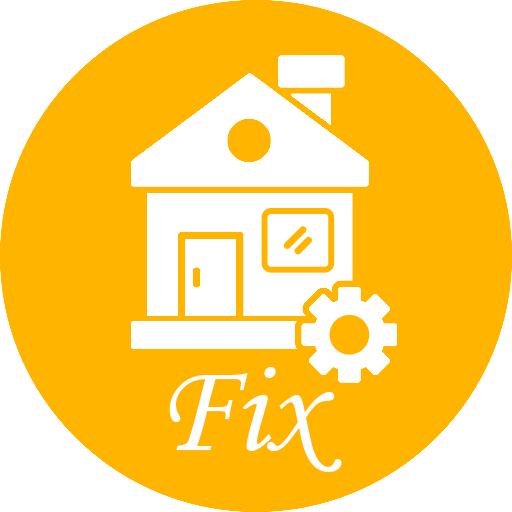
<style>
.page{position:relative;width:512px;height:512px;background:#ffb500}
.page>*{position:absolute;margin:0}
.t1{font:133.3px "MonotypeCorsiva";color:#ffffff}
</style>
<div class="page">
<p class="t1" style="left:169px;top:367px;width:173px;height:105px">Fix</p>
</div>
